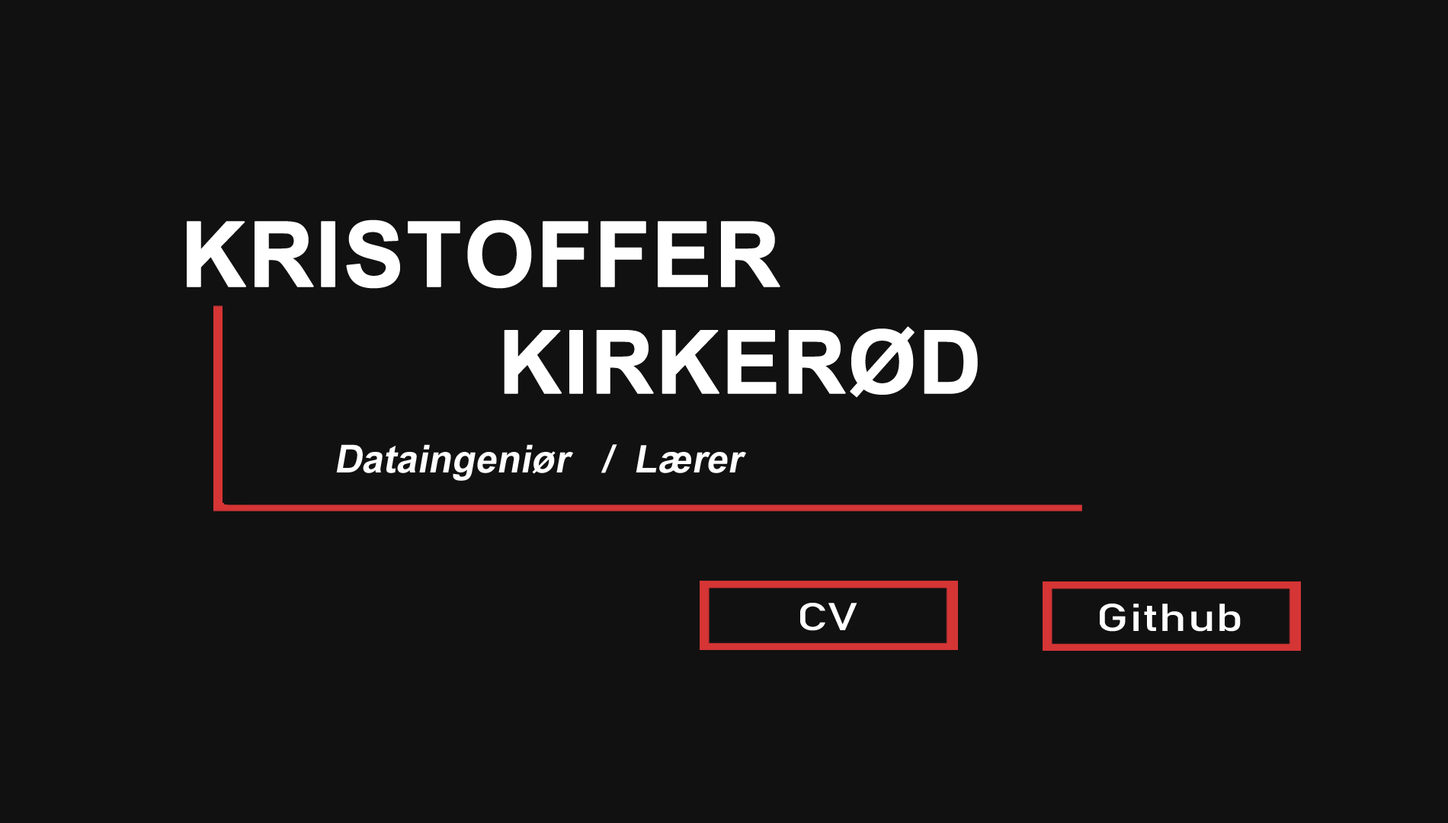
<style>
.page{position:relative;width:1448px;height:823px;background:#111111}
.page>*{position:absolute;margin:0}
.t1{font:90.4px "Arial-BoldMT";color:#ffffff;font-weight:bold}
.t2{font:87.5px "Arial-BoldMT";color:#ffffff;font-weight:bold}
.t3{font:38.5px "Arial-BoldMT";color:#ffffff;font-style:italic}
.t4{font:38.4px "Bahnschrift";color:#ffffff;scale:1.33 1}
</style>
<div class="page">
<p class="t1" style="left:187px;top:220px;width:594px;height:69px">KRISTOFFER</p>
<p class="t2" style="left:504px;top:326px;width:474px;height:72px">KIRKERØD</p>
<p class="t3" style="left:336px;top:444px;width:410px;height:37px">Dataingeniør   /  Lærer</p>
<p class="t4" style="left:800px;top:603px;width:58px;height:28px">CV</p>
<p class="t4" style="left:1100px;top:604px;width:141px;height:28px">Github</p>
</div>
